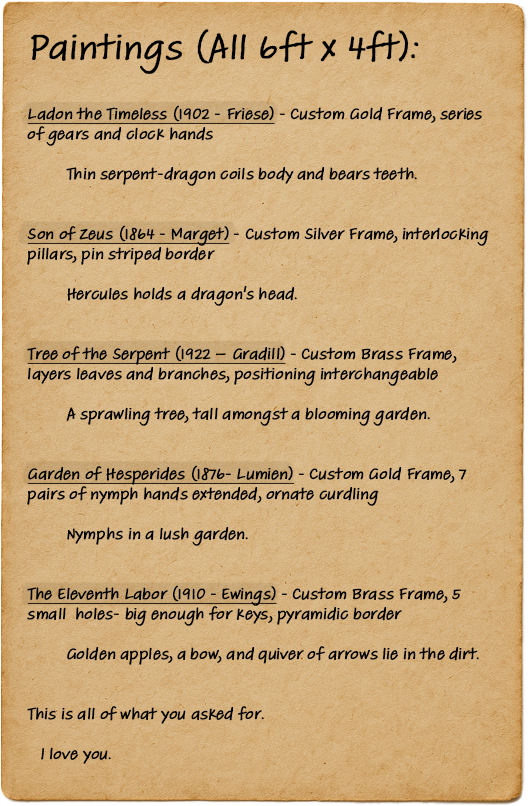
<style>
.page{position:relative;width:528px;height:806px}
.page>*{position:absolute;margin:0}
.t1{font:16.7px "AdobeHandwriting-Tiffany";color:#000000;font-weight:bold}
.t2{font:37.5px "AdobeHandwriting-Tiffany";color:#000000;font-weight:bold}
.t3{font:16.7px "AdobeHandwriting-Tiffany";color:#000000;font-weight:bold;text-decoration:underline}
</style>
<div class="page">
<p class="t1" style="left:27px;top:29px;width:462px;height:735px"><span class="t2">Paintings (All 6ft x 4ft):<br><br>  <br></span><span class="t3">Ladon the Timeless (1902 - Friese)</span> - Custom Gold Frame, series of gears and clock hands <br> <br>   Thin serpent-dragon coils body and bears teeth.<br><br><br><span class="t3">Son of Zeus (1864 - Marget)</span> - Custom Silver Frame, interlocking pillars, pin striped border<br>  <br>   Hercules holds a dragon's head.<br><br><br><span class="t3">Tree of the Serpent (1922 – Gradill)</span> - Custom Brass Frame, layers leaves and branches, positioning interchangeable<br><br>   A sprawling tree, tall amongst a blooming garden.<br><br><br><span class="t3">Garden of Hesperides (1876- Lumien)</span> - Custom Gold Frame, 7 pairs of nymph hands extended, ornate curdling<br> <br>   Nymphs in a lush garden.<br><br><br><span class="t3">The Eleventh Labor (1910 - Ewings)</span> - Custom Brass Frame, 5 small  holes- big enough for keys, pyramidic border<br><br>   Golden apples, a bow, and quiver of arrows lie in the dirt. <br><br> <br>This is all of what you asked for. <br> <br> I love you.</p>
</div>
